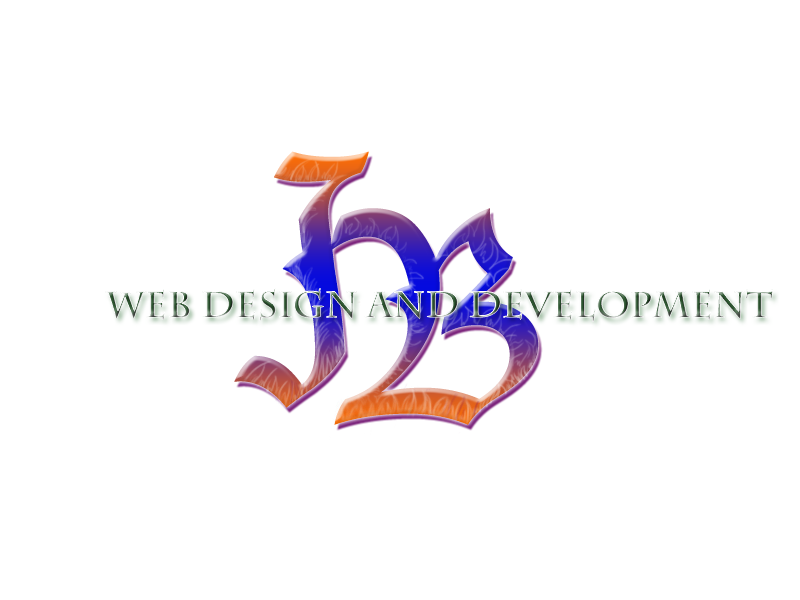
<style>
.page{position:relative;width:800px;height:600px;background:#ffffff}
.page>*{position:absolute;margin:0}
.t1{font:36px "CharlemagneStd-Bold"}
</style>
<div class="page">
<p class="t1" style="left:105px;top:288px;width:668px;height:34px">Web Design and Development</p>
</div>
